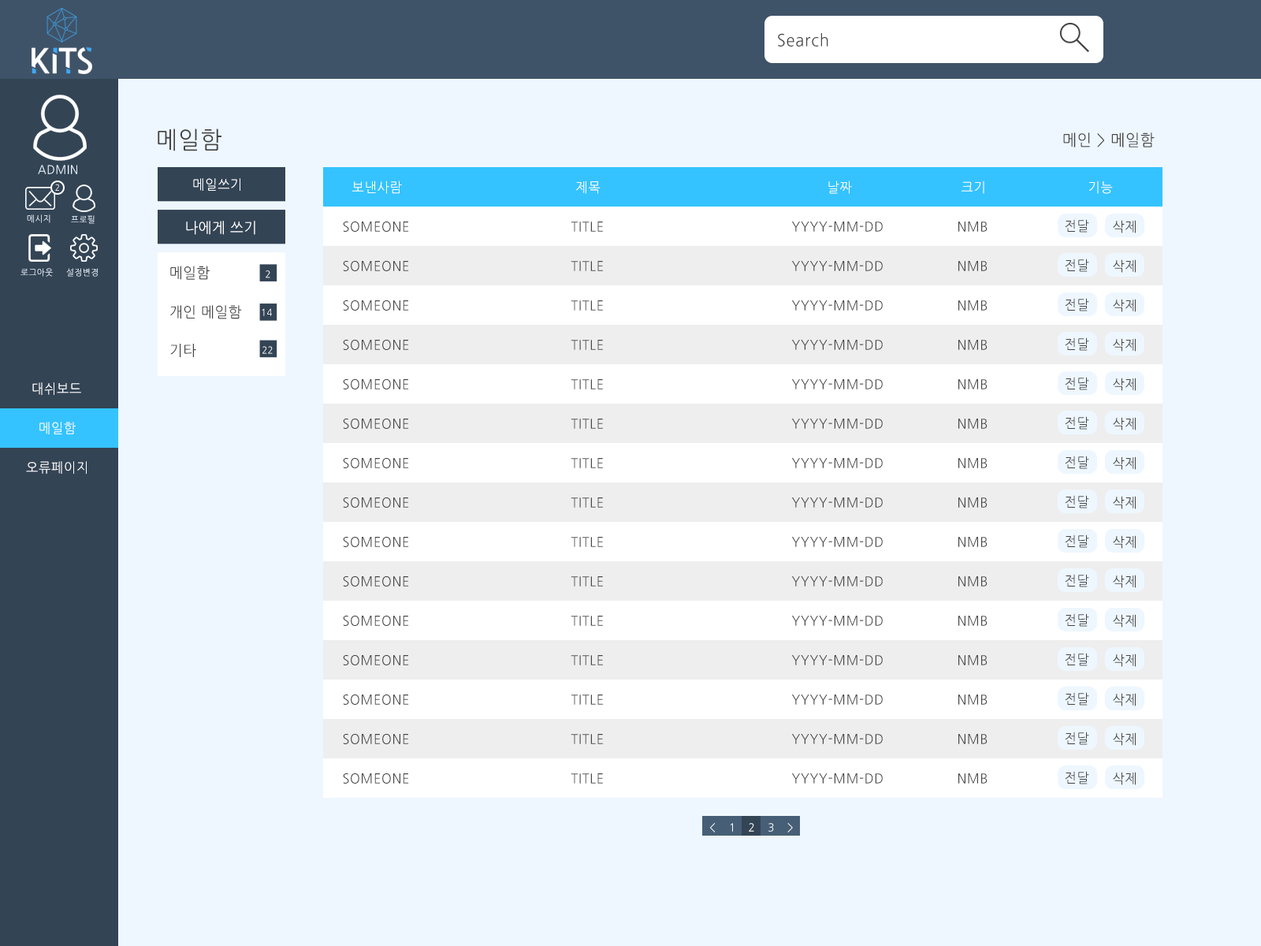
<style>
.page{position:relative;width:1261px;height:946px;background:#eef7ff}
.page>*{position:absolute;margin:0}
.t1{font:16.5px "NanumGothic";letter-spacing:0.04em;color:#444444;scale:0.96 1}
.t2{font:23.6px "NanumGothic";letter-spacing:0.04em;color:#444444;scale:0.96 1}
.t3{font:15.8px "NanumGothic";letter-spacing:0.04em;color:#444444;scale:0.96 1}
.t4{font:11.8px "NanumGothic";letter-spacing:0.04em;color:#eef7ff;scale:0.96 1}
.t5{font:8.7px "NanumGothic";letter-spacing:0.04em;color:#ffffff;scale:0.93 1}
.t6{font:13.4px "NanumGothic";letter-spacing:0.04em;color:#ffffff;scale:0.96 1}
.t7{font:8.7px "NanumGothic";letter-spacing:0.04em;color:#eef7ff;scale:0.96 1}
.t8{font:14.5px "NanumGothic";letter-spacing:0.04em;color:#ffffff;scale:0.96 1}
.t9{font:13.4px "NanumGothic";letter-spacing:0.04em;color:#444444;scale:0.96 1}
.t10{font:8.7px "NanumGothic";letter-spacing:0.04em;scale:0.96 1}
.t11{font:14.5px "NanumGothic";letter-spacing:0.04em;color:#444444;scale:0.96 1}
.t12{font:9.4px "NanumGothic";letter-spacing:0.04em;scale:0.96 1}
.t13{font:9.4px "NanumGothic";letter-spacing:0.04em;color:#ffffff;scale:0.96 1}
.t14{font:10.8px "NanumGothic";letter-spacing:0.04em}
.t15{font:10.8px "NanumGothic";letter-spacing:0.04em;color:#ffffff}
</style>
<div class="page">
<p class="t1" style="left:778px;top:33px;width:50px;height:13px">Search</p>
<p class="t2" style="left:158px;top:128px;width:63px;height:23px">메일함</p>
<p class="t3" style="left:1063px;top:132px;width:92px;height:15px">메인 &gt; 메일함</p>
<p class="t4" style="left:38px;top:165px;width:39px;height:9px">ADMIN</p>
<p class="t5" style="left:55px;top:184px;width:4px;height:7px">2</p>
<p class="t6" style="left:193px;top:178px;width:47px;height:13px">메일쓰기</p>
<p class="t6" style="left:352px;top:180px;width:50px;height:14px">보낸사람</p>
<p class="t6" style="left:576px;top:180px;width:25px;height:14px">제목</p>
<p class="t6" style="left:828px;top:180px;width:24px;height:14px">날짜</p>
<p class="t6" style="left:961px;top:180px;width:23px;height:14px">크기</p>
<p class="t6" style="left:1089px;top:180px;width:24px;height:14px">기능</p>
<p class="t7" style="left:27px;top:214px;width:23px;height:9px">메시지</p>
<p class="t7" style="left:71px;top:215px;width:24px;height:9px">프로필</p>
<p class="t8" style="left:186px;top:221px;width:69px;height:14px">나에게 쓰기</p>
<p class="t9" style="left:343px;top:221px;width:66px;height:11px">SOMEONE</p>
<p class="t9" style="left:571px;top:221px;width:32px;height:11px">TITLE</p>
<p class="t9" style="left:792px;top:221px;width:91px;height:11px">YYYY-MM-DD</p>
<p class="t9" style="left:958px;top:221px;width:29px;height:11px">NMB</p>
<p class="t9" style="left:1065px;top:219px;width:24px;height:13px">전달</p>
<p class="t9" style="left:1113px;top:220px;width:23px;height:13px">삭제</p>
<p class="t10" style="left:20px;top:268px;width:33px;height:9px">로그아웃</p>
<p class="t7" style="left:66px;top:268px;width:32px;height:9px">설정변경</p>
<p class="t11" style="left:170px;top:266px;width:40px;height:14px">메일함</p>
<p class="t9" style="left:343px;top:261px;width:66px;height:10px">SOMEONE</p>
<p class="t9" style="left:571px;top:261px;width:32px;height:10px">TITLE</p>
<p class="t9" style="left:792px;top:261px;width:91px;height:10px">YYYY-MM-DD</p>
<p class="t9" style="left:958px;top:261px;width:29px;height:10px">NMB</p>
<p class="t9" style="left:1065px;top:258px;width:24px;height:14px">전달</p>
<p class="t9" style="left:1113px;top:259px;width:23px;height:14px">삭제</p>
<p class="t12" style="left:266px;top:270px;width:4px;height:8px">2</p>
<p class="t11" style="left:170px;top:305px;width:72px;height:14px">개인 메일함</p>
<p class="t9" style="left:343px;top:300px;width:66px;height:11px">SOMEONE</p>
<p class="t9" style="left:571px;top:300px;width:32px;height:11px">TITLE</p>
<p class="t9" style="left:792px;top:300px;width:91px;height:11px">YYYY-MM-DD</p>
<p class="t9" style="left:958px;top:300px;width:29px;height:11px">NMB</p>
<p class="t9" style="left:1065px;top:298px;width:24px;height:13px">전달</p>
<p class="t9" style="left:1113px;top:299px;width:23px;height:13px">삭제</p>
<p class="t13" style="left:262px;top:308px;width:10px;height:8px">14</p>
<p class="t9" style="left:343px;top:340px;width:66px;height:10px">SOMEONE</p>
<p class="t9" style="left:571px;top:340px;width:32px;height:10px">TITLE</p>
<p class="t9" style="left:792px;top:340px;width:91px;height:10px">YYYY-MM-DD</p>
<p class="t9" style="left:958px;top:340px;width:29px;height:10px">NMB</p>
<p class="t9" style="left:1065px;top:337px;width:24px;height:14px">전달</p>
<p class="t9" style="left:1113px;top:338px;width:23px;height:13px">삭제</p>
<p class="t11" style="left:170px;top:344px;width:26px;height:13px">기타</p>
<p class="t13" style="left:262px;top:346px;width:11px;height:8px">22</p>
<p class="t9" style="left:1065px;top:377px;width:24px;height:13px">전달</p>
<p class="t9" style="left:1113px;top:377px;width:23px;height:14px">삭제</p>
<p class="t6" style="left:32px;top:382px;width:49px;height:13px">대쉬보드</p>
<p class="t9" style="left:343px;top:379px;width:66px;height:10px">SOMEONE</p>
<p class="t9" style="left:571px;top:379px;width:32px;height:10px">TITLE</p>
<p class="t9" style="left:792px;top:379px;width:91px;height:10px">YYYY-MM-DD</p>
<p class="t9" style="left:958px;top:379px;width:29px;height:10px">NMB</p>
<p class="t6" style="left:39px;top:422px;width:37px;height:12px">메일함</p>
<p class="t9" style="left:343px;top:418px;width:66px;height:11px">SOMEONE</p>
<p class="t9" style="left:571px;top:418px;width:32px;height:11px">TITLE</p>
<p class="t9" style="left:792px;top:418px;width:91px;height:11px">YYYY-MM-DD</p>
<p class="t9" style="left:958px;top:418px;width:29px;height:11px">NMB</p>
<p class="t9" style="left:1065px;top:416px;width:24px;height:13px">전달</p>
<p class="t9" style="left:1113px;top:417px;width:23px;height:13px">삭제</p>
<p class="t6" style="left:26px;top:461px;width:61px;height:13px">오류페이지</p>
<p class="t9" style="left:343px;top:458px;width:66px;height:10px">SOMEONE</p>
<p class="t9" style="left:571px;top:458px;width:32px;height:10px">TITLE</p>
<p class="t9" style="left:792px;top:458px;width:91px;height:10px">YYYY-MM-DD</p>
<p class="t9" style="left:958px;top:458px;width:29px;height:10px">NMB</p>
<p class="t9" style="left:1065px;top:456px;width:24px;height:13px">전달</p>
<p class="t9" style="left:1113px;top:456px;width:23px;height:14px">삭제</p>
<p class="t9" style="left:343px;top:497px;width:66px;height:11px">SOMEONE</p>
<p class="t9" style="left:571px;top:497px;width:32px;height:11px">TITLE</p>
<p class="t9" style="left:792px;top:497px;width:91px;height:11px">YYYY-MM-DD</p>
<p class="t9" style="left:958px;top:497px;width:29px;height:11px">NMB</p>
<p class="t9" style="left:1065px;top:495px;width:24px;height:13px">전달</p>
<p class="t9" style="left:1113px;top:496px;width:23px;height:13px">삭제</p>
<p class="t9" style="left:343px;top:537px;width:66px;height:10px">SOMEONE</p>
<p class="t9" style="left:571px;top:537px;width:32px;height:10px">TITLE</p>
<p class="t9" style="left:792px;top:537px;width:91px;height:10px">YYYY-MM-DD</p>
<p class="t9" style="left:958px;top:537px;width:29px;height:10px">NMB</p>
<p class="t9" style="left:1065px;top:534px;width:24px;height:14px">전달</p>
<p class="t9" style="left:1113px;top:535px;width:23px;height:13px">삭제</p>
<p class="t9" style="left:343px;top:576px;width:66px;height:10px">SOMEONE</p>
<p class="t9" style="left:571px;top:576px;width:32px;height:10px">TITLE</p>
<p class="t9" style="left:792px;top:576px;width:91px;height:10px">YYYY-MM-DD</p>
<p class="t9" style="left:958px;top:576px;width:29px;height:10px">NMB</p>
<p class="t9" style="left:1065px;top:574px;width:24px;height:13px">전달</p>
<p class="t9" style="left:1113px;top:575px;width:23px;height:13px">삭제</p>
<p class="t9" style="left:343px;top:615px;width:66px;height:11px">SOMEONE</p>
<p class="t9" style="left:571px;top:615px;width:32px;height:11px">TITLE</p>
<p class="t9" style="left:792px;top:615px;width:91px;height:11px">YYYY-MM-DD</p>
<p class="t9" style="left:958px;top:615px;width:29px;height:11px">NMB</p>
<p class="t9" style="left:1065px;top:613px;width:24px;height:14px">전달</p>
<p class="t9" style="left:1113px;top:614px;width:23px;height:13px">삭제</p>
<p class="t9" style="left:1065px;top:653px;width:24px;height:13px">전달</p>
<p class="t9" style="left:1113px;top:653px;width:23px;height:14px">삭제</p>
<p class="t9" style="left:343px;top:655px;width:66px;height:10px">SOMEONE</p>
<p class="t9" style="left:571px;top:655px;width:32px;height:10px">TITLE</p>
<p class="t9" style="left:792px;top:655px;width:91px;height:10px">YYYY-MM-DD</p>
<p class="t9" style="left:958px;top:655px;width:29px;height:10px">NMB</p>
<p class="t9" style="left:343px;top:694px;width:66px;height:11px">SOMEONE</p>
<p class="t9" style="left:571px;top:694px;width:32px;height:11px">TITLE</p>
<p class="t9" style="left:792px;top:694px;width:91px;height:11px">YYYY-MM-DD</p>
<p class="t9" style="left:958px;top:694px;width:29px;height:11px">NMB</p>
<p class="t9" style="left:1065px;top:692px;width:24px;height:13px">전달</p>
<p class="t9" style="left:1113px;top:693px;width:23px;height:13px">삭제</p>
<p class="t9" style="left:343px;top:734px;width:66px;height:10px">SOMEONE</p>
<p class="t9" style="left:571px;top:734px;width:32px;height:10px">TITLE</p>
<p class="t9" style="left:792px;top:734px;width:91px;height:10px">YYYY-MM-DD</p>
<p class="t9" style="left:958px;top:734px;width:29px;height:10px">NMB</p>
<p class="t9" style="left:1065px;top:731px;width:24px;height:14px">전달</p>
<p class="t9" style="left:1113px;top:732px;width:23px;height:14px">삭제</p>
<p class="t9" style="left:343px;top:773px;width:66px;height:10px">SOMEONE</p>
<p class="t9" style="left:571px;top:773px;width:32px;height:10px">TITLE</p>
<p class="t9" style="left:792px;top:773px;width:91px;height:10px">YYYY-MM-DD</p>
<p class="t9" style="left:958px;top:773px;width:29px;height:10px">NMB</p>
<p class="t9" style="left:1065px;top:771px;width:24px;height:13px">전달</p>
<p class="t9" style="left:1113px;top:772px;width:23px;height:13px">삭제</p>
<p class="t14" style="left:710px;top:822px;width:5px;height:10px">&lt;</p>
<p class="t14" style="left:787px;top:822px;width:6px;height:10px">&gt;</p>
<p class="t15" style="left:731px;top:823px;width:2px;height:8px">1</p>
<p class="t15" style="left:749px;top:823px;width:5px;height:8px">2</p>
<p class="t14" style="left:768px;top:823px;width:6px;height:8px">3</p>
</div>
